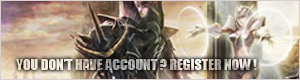
<style>
.page{position:relative;width:300px;height:80px}
.page>*{position:absolute;margin:0}
.t1{font:14px "Impact"}
</style>
<div class="page">
<p class="t1" style="left:16px;top:59px;width:241px;height:11px">YOU DON’T HAVE ACCOUNT ? REGISTER NOW !</p>
</div>
